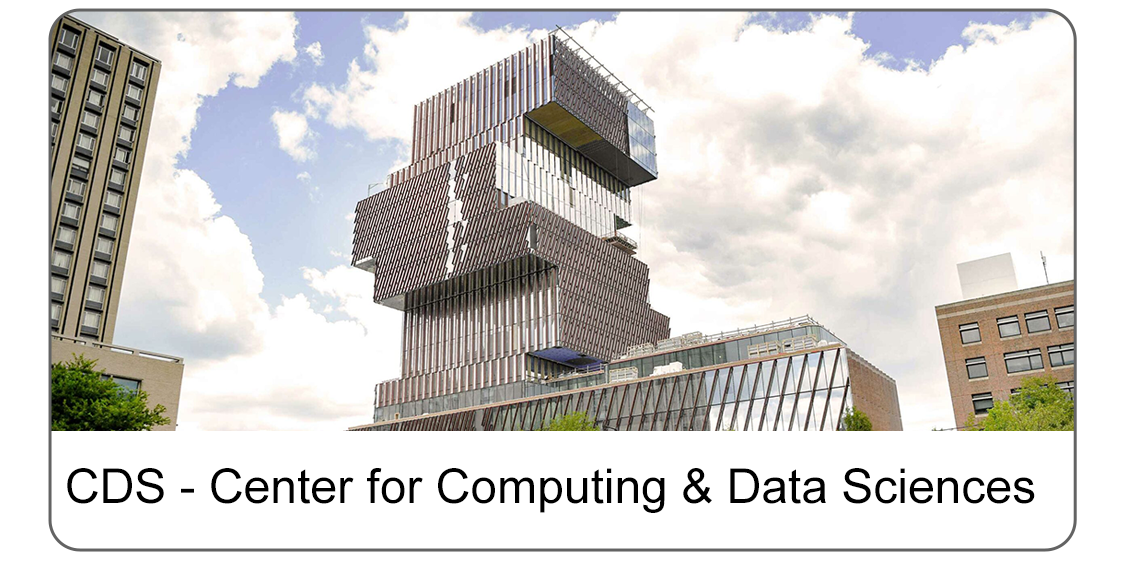
<style>
.page{position:relative;width:1125px;height:576px;background:#ffffff}
.page>*{position:absolute;margin:0}
.t1{font:48px "ArialMT";color:#000000}
</style>
<div class="page">
<p class="t1" style="left:67px;top:468px;width:968px;height:45px">CDS - Center for Computing &amp; Data Sciences</p>
</div>
